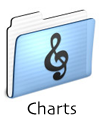
<style>
.page{position:relative;width:100px;height:122px;background:#ffffff}
.page>*{position:absolute;margin:0}
.t1{font:17.7px "Skia-Regular";color:#000000}
</style>
<div class="page">
<p class="t1" style="left:27px;top:101px;width:49px;height:14px">Charts</p>
</div>
